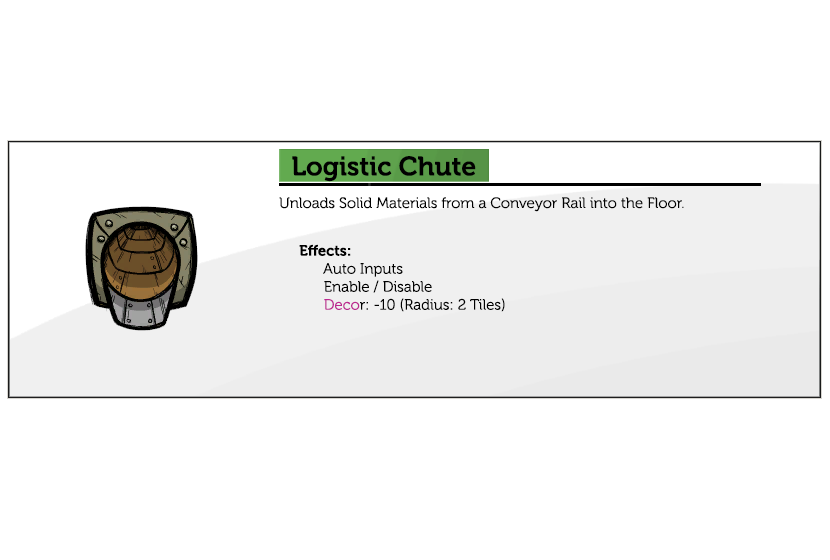
<style>
.page{position:relative;width:830px;height:560px;background:#ffffff}
.page>*{position:absolute;margin:0}
.t1{font:26.7px "Museo-700";color:#000000}
.t2{font:15px "Museo-300";color:#000000}
.t3{font:15px "Museo-700";color:#000000}
.t4{font:15px "Museo-300";color:#bc2991}
</style>
<div class="page">
<p class="t1" style="left:292px;top:156px;width:184px;height:26px">Logistic Chute</p>
<p class="t2" style="left:279px;top:197px;width:405px;height:15px">Unloads Solid Materials from a Conveyor Rail into the Floor.</p>
<p class="t2" style="left:299px;top:244px;width:206px;height:68px"><span class="t3">Effects:<br>      </span>Auto Inputs<br>      Enable / Disable<br>      <span class="t4">Deco</span>r: -10 (Radius: 2 Tiles)</p>
</div>
